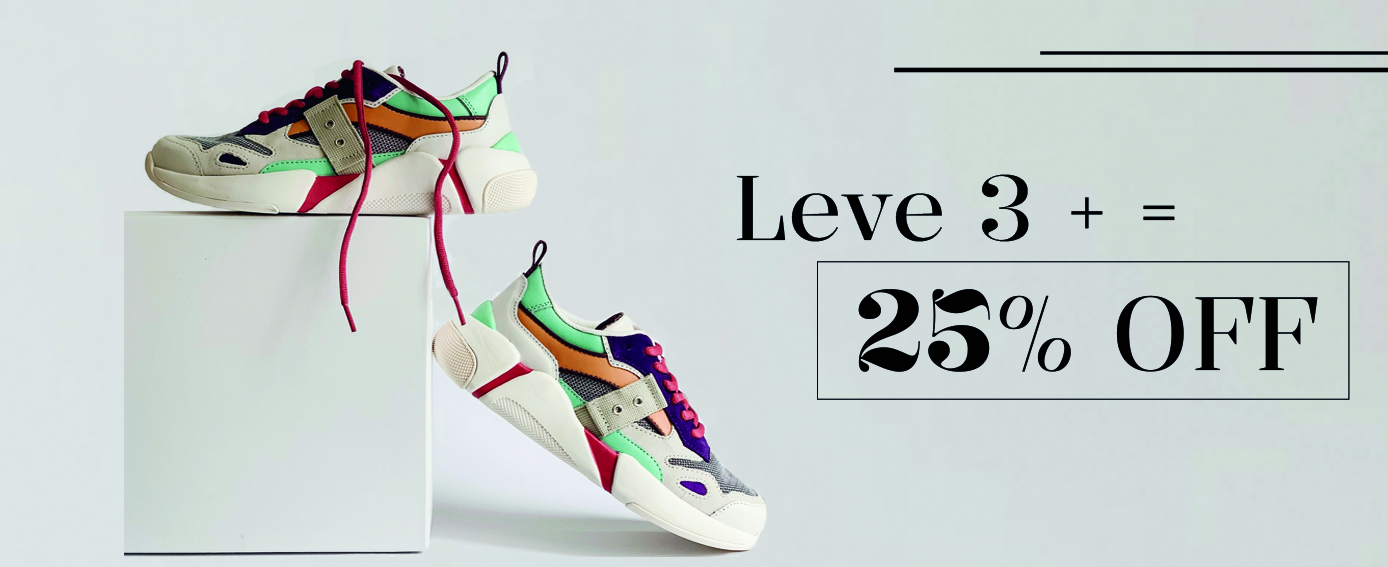
<style>
.page{position:relative;width:1388px;height:567px}
.page>*{position:absolute;margin:0}
.t1{font:90.4px "Kalnia-Regular";color:#010102}
.t2{font:102.6px "Kalnia-Regular";color:#010102}
.t3{font:111.8px "Kalnia-SemiBold";color:#010102;scale:0.92 1}
</style>
<div class="page">
<p class="t1" style="left:736px;top:174px;width:439px;height:68px">Leve 3 + =</p>
<p class="t2" style="left:858px;top:289px;width:460px;height:83px"><span class="t3">25</span>% OFF</p>
</div>
